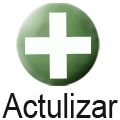
<style>
.page{position:relative;width:120px;height:120px;background:#ffffff}
.page>*{position:absolute;margin:0}
.t1{font:33.6px "ArialMT";color:#161616;scale:0.89 1}
</style>
<div class="page">
<p class="t1" style="left:2px;top:93px;width:116px;height:25px">Actulizar</p>
</div>
